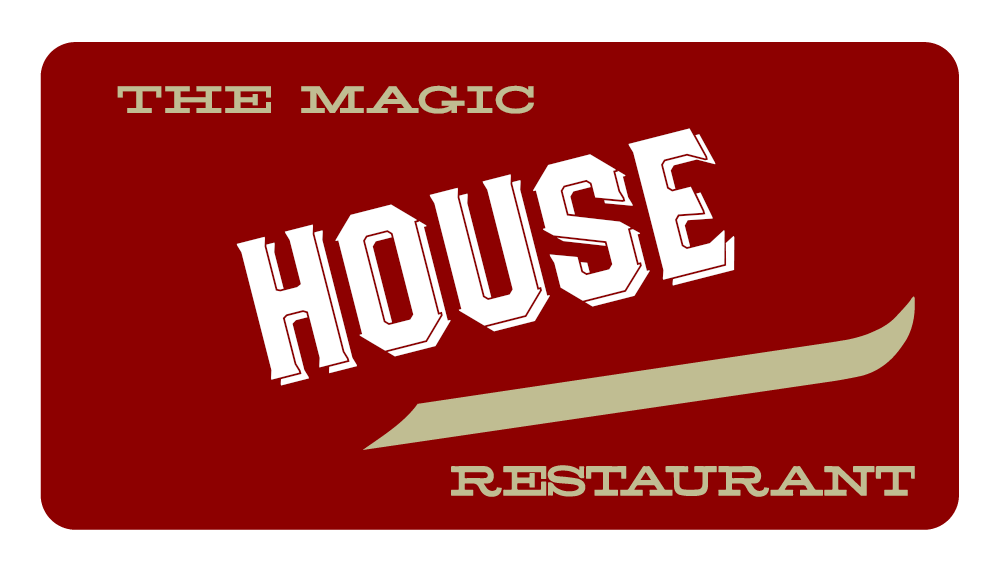
<style>
.page{position:relative;width:1000px;height:570px;background:#8d0000}
.page>*{position:absolute;margin:0}
.t1{font:36px "LonestarW00-Regular";color:#c0bd92}
.t2{font:200px "DealersShaded";color:#ffffff}
</style>
<div class="page">
<p class="t1" style="left:117px;top:85px;width:417px;height:29px">THE MAGIC</p>
<p class="t2" style="left:236px;top:128px;width:499px;height:258px;rotate:-14deg">HOUSE</p>
</div>
